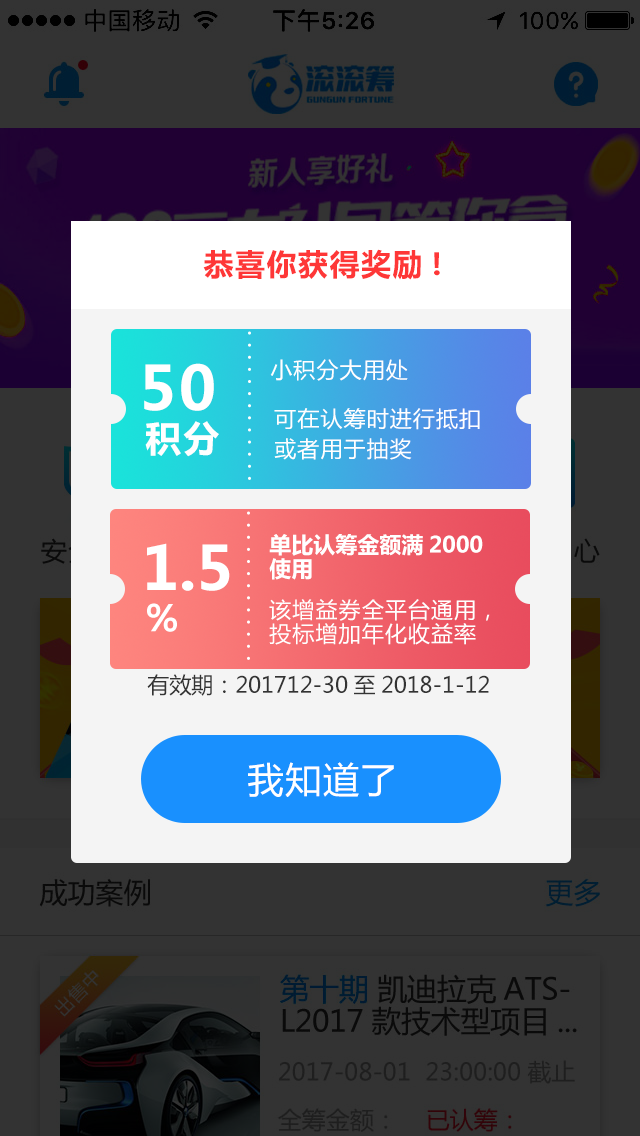
<style>
.page{position:relative;width:640px;height:1136px;background:#333333}
.page>*{position:absolute;margin:0}
.t1{font:30px "MicrosoftYaHei-Bold";letter-spacing:0.05em;color:#fe3737}
.t2{font:60px "MicrosoftYaHei-Bold";letter-spacing:0.05em;color:#ffffff}
.t3{font:22px "MicrosoftYaHei";letter-spacing:0.05em;color:#ffffff}
.t4{font:22px/30px "MicrosoftYaHei";letter-spacing:0.05em;color:#ffffff}
.t5{font:36px "MicrosoftYaHei-Bold";letter-spacing:0.05em;color:#ffffff}
.t6{font:22px/24px "MicrosoftYaHei-Bold";color:#ffffff}
.t7{font:60px "MicrosoftYaHei-Bold";color:#ffffff}
.t8{font:22px/24px "MicrosoftYaHei";letter-spacing:0.05em;color:#ffffff}
.t9{font:22px "MicrosoftYaHei";color:#333333}
.t10{font:36px "MicrosoftYaHei";letter-spacing:0.05em;color:#ffffff}
</style>
<div class="page">
<p class="t1" style="left:203px;top:249px;width:237px;height:31px">恭喜你获得奖励!</p>
<p class="t2" style="left:144px;top:363px;width:70px;height:48px">50</p>
<p class="t3" style="left:270px;top:359px;width:138px;height:22px">小积分大用处</p>
<p class="t4" style="left:274px;top:408px;width:206px;height:52px">可在认筹时进行抵扣<br>或者用于抽奖</p>
<p class="t5" style="left:145px;top:421px;width:74px;height:36px">积分</p>
<p class="t6" style="left:269px;top:534px;width:214px;height:46px">单比认筹金额满2000<br>使用</p>
<p class="t7" style="left:147px;top:543px;width:83px;height:48px">1.5</p>
<p class="t5" style="left:147px;top:603px;width:30px;height:29px">%</p>
<p class="t8" style="left:269px;top:599px;width:221px;height:46px">该增益券全平台通用，<br>投标增加年化收益率</p>
<p class="t9" style="left:147px;top:674px;width:342px;height:22px">有效期：201712-30至2018-1-12</p>
<p class="t10" style="left:248px;top:762px;width:146px;height:35px">我知道了</p>
</div>
